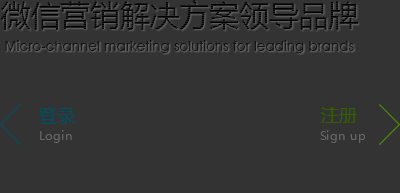
<style>
.page{position:relative;width:400px;height:193px;background:#333333}
.page>*{position:absolute;margin:0}
.t1{font:29.8px "MicrosoftYaHei"}
.t2{font:14.3px "AvantGardeITCbyBT-Medium";color:#151515}
.t3{font:18px "MicrosoftYaHei";color:#004f61}
.t4{font:18px "MicrosoftYaHei";color:#365e01}
.t5{font:12px "MicrosoftYaHei";color:#666666}
</style>
<div class="page">
<p class="t1" style="left:0px;top:0px;width:359px;height:30px">微信营销解决方案领导品牌</p>
<p class="t2" style="left:5px;top:40px;width:349px;height:13px">Micro-channel marketing solutions for leading brands</p>
<p class="t3" style="left:39px;top:107px;width:36px;height:17px">登录</p>
<p class="t4" style="left:321px;top:107px;width:36px;height:16px">注册</p>
<p class="t5" style="left:40px;top:130px;width:32px;height:13px">Login</p>
<p class="t5" style="left:320px;top:130px;width:45px;height:13px">Sign up</p>
</div>
